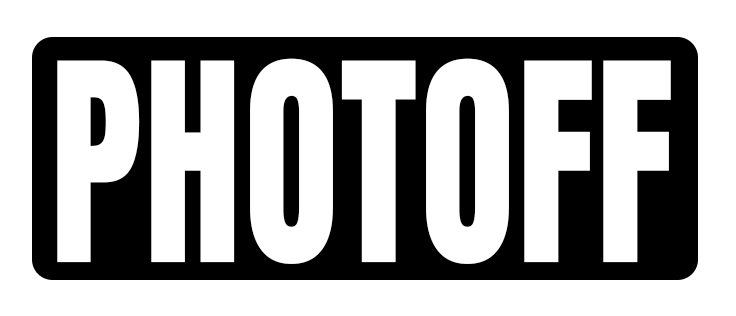
<style>
.page{position:relative;width:736px;height:316px;background:#ffffff}
.page>*{position:absolute;margin:0}
.t1{font:234.4px "Anton-Regular";color:#ffffff;text-transform:uppercase;scale:0.83 1}
</style>
<div class="page">
<p class="t1" style="left:57px;top:58px;width:614px;height:206px">photoff</p>
</div>
